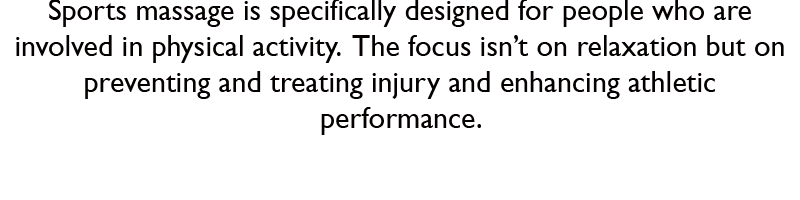
<style>
.page{position:relative;width:800px;height:200px;background:#ffffff}
.page>*{position:absolute;margin:0}
.t1{font:30px "GillSansMT";color:#050000}
</style>
<div class="page">
<p class="t1" style="left:16px;top:0px;width:768px;height:135px;text-align:center">Sports massage is specifically designed for people who are involved in physical activity.  The focus isn’t on relaxation but on preventing and treating injury and enhancing athletic performance.</p>
</div>
